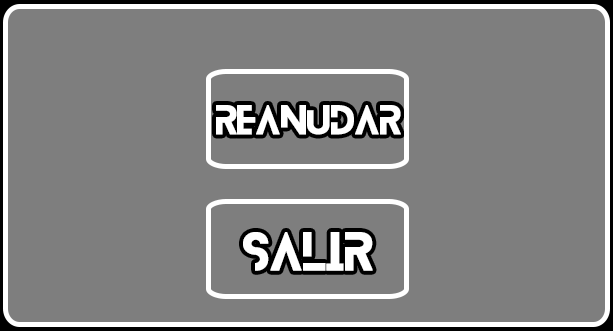
<style>
.page{position:relative;width:613px;height:331px;background:#7e7e7e}
.page>*{position:absolute;margin:0}
.t1{font:36px "Blanka-Regular";color:#ffffff;font-weight:bold}
.t2{font:48px "Blanka-Regular";color:#ffffff;font-weight:bold}
</style>
<div class="page">
<p class="t1" style="left:216px;top:105px;width:185px;height:30px">REANUDAR</p>
<p class="t2" style="left:243px;top:232px;width:130px;height:39px">SALIR</p>
</div>
